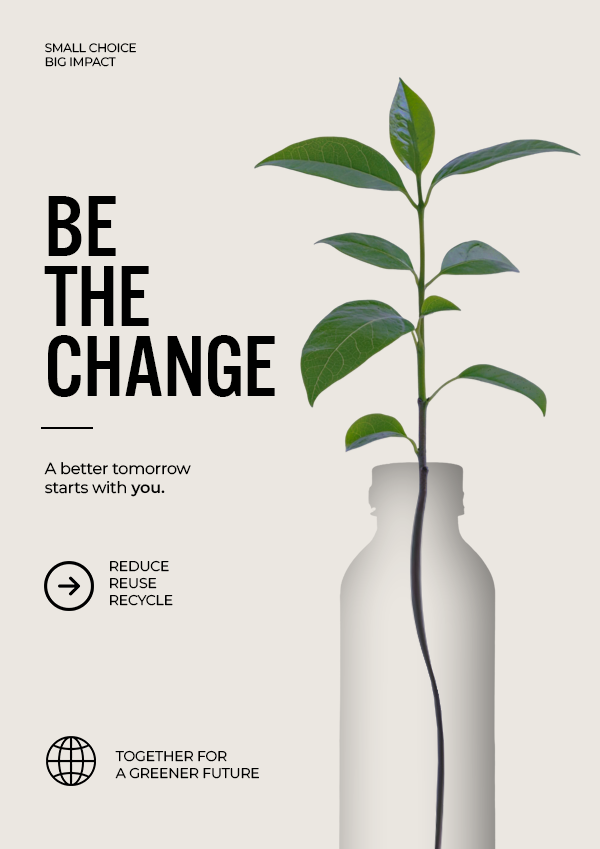
<style>
.page{position:relative;width:600px;height:849px;background:#ebe7e1}
.page>*{position:absolute;margin:0}
.t1{font:12px "Montserrat-Regular";letter-spacing:-0.01em;color:#000000;text-transform:uppercase}
.t2{font:90px/70px "AlternateGotNo3D";letter-spacing:-0.01em;color:#000000;text-transform:uppercase}
.t3{font:16px "Montserrat-Regular";letter-spacing:-0.01em;color:#000000}
.t4{font:16px "Montserrat-SemiBold";letter-spacing:-0.01em;color:#000000}
.t5{font:14px "Montserrat-Regular";letter-spacing:-0.01em;color:#000000}
.t6{font:14px "Montserrat-Regular";letter-spacing:-0.01em;color:#000000;text-transform:uppercase}
</style>
<div class="page">
<p class="t1" style="left:45px;top:43px;width:91px;height:24px">Small Choice <br>big impact</p>
<p class="t2" style="left:44px;top:196px;width:231px;height:201px">BE <br>THe<br>Change</p>
<p class="t3" style="left:44px;top:462px;width:147px;height:35px">A better tomorrow starts with <span class="t4">you.</span></p>
<p class="t5" style="left:110px;top:560px;width:63px;height:46px">REDUCE<br>REUSE<br>RECYCLE</p>
<p class="t6" style="left:115px;top:750px;width:144px;height:29px">Together for <br>A greener future</p>
</div>
